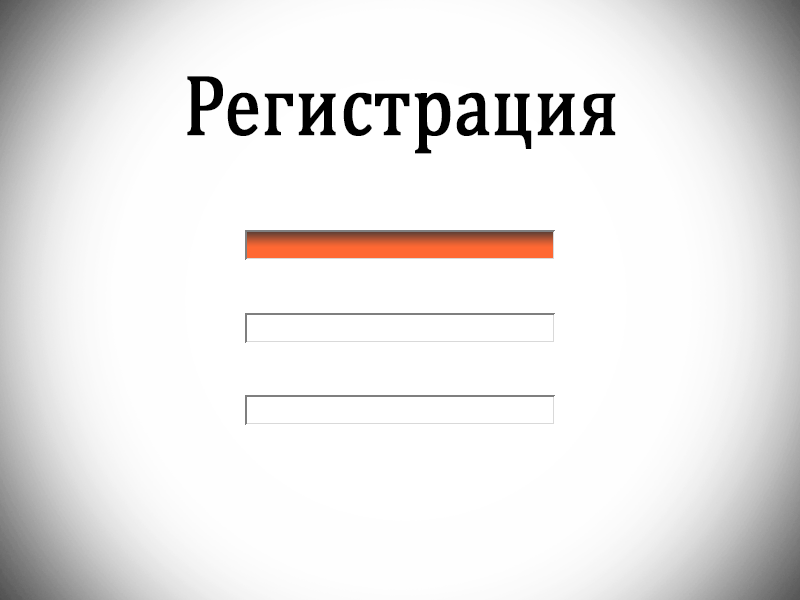
<style>
.page{position:relative;width:800px;height:600px;background:#ffffff}
.page>*{position:absolute;margin:0}
.t1{font:86.4px "Cambria";color:#000000;font-weight:bold;scale:0.83 1}
</style>
<div class="page">
<p class="t1" style="left:187px;top:76px;width:429px;height:78px">Регистрация</p>
</div>
